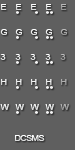
<style>
.page{position:relative;width:75px;height:150px;background:#5f5f5f}
.page>*{position:absolute;margin:0}
.t1{font:8.2px "ArialMT";letter-spacing:-0.05em;color:#feffff;scale:1.06 1}
.t2{font:8.2px "ArialMT";letter-spacing:-0.05em;scale:1.06 1}
.t3{font:8.2px "ArialMT";letter-spacing:-0.05em;color:#a6a6a6;scale:1.06 1}
.t4{font:8.2px "ArialMT";letter-spacing:-0.05em;color:#aeaeae;scale:1.06 1}
</style>
<div class="page">
<p class="t1" style="left:1px;top:4px;width:6px;height:6px">E</p>
<p class="t1" style="left:16px;top:4px;width:6px;height:6px">E</p>
<p class="t1" style="left:31px;top:4px;width:6px;height:6px">E</p>
<p class="t1" style="left:46px;top:4px;width:6px;height:6px">E</p>
<p class="t2" style="left:61px;top:4px;width:6px;height:6px">E</p>
<p class="t1" style="left:0px;top:29px;width:7px;height:6px">G</p>
<p class="t1" style="left:15px;top:29px;width:7px;height:6px">G</p>
<p class="t1" style="left:30px;top:29px;width:7px;height:6px">G</p>
<p class="t1" style="left:45px;top:29px;width:7px;height:6px">G</p>
<p class="t3" style="left:60px;top:29px;width:7px;height:6px">G</p>
<p class="t2" style="left:0px;top:54px;width:6px;height:6px">3</p>
<p class="t2" style="left:15px;top:54px;width:6px;height:6px">3</p>
<p class="t2" style="left:30px;top:54px;width:6px;height:6px">3</p>
<p class="t2" style="left:45px;top:54px;width:6px;height:6px">3</p>
<p class="t2" style="left:60px;top:54px;width:6px;height:6px">3</p>
<p class="t1" style="left:1px;top:79px;width:6px;height:6px">H</p>
<p class="t1" style="left:16px;top:79px;width:6px;height:6px">H</p>
<p class="t1" style="left:31px;top:79px;width:6px;height:6px">H</p>
<p class="t1" style="left:46px;top:79px;width:6px;height:6px">H</p>
<p class="t4" style="left:61px;top:79px;width:6px;height:6px">H</p>
<p class="t2" style="left:0px;top:104px;width:9px;height:6px">W</p>
<p class="t2" style="left:15px;top:104px;width:9px;height:6px">W</p>
<p class="t2" style="left:30px;top:104px;width:9px;height:6px">W</p>
<p class="t2" style="left:45px;top:104px;width:9px;height:6px">W</p>
<p class="t2" style="left:60px;top:104px;width:9px;height:6px">W</p>
<p class="t2" style="left:15px;top:135px;width:30px;height:6px">DCSMS</p>
</div>
